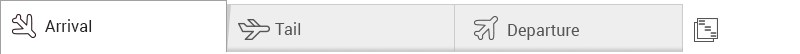
<style>
.page{position:relative;width:800px;height:54px;background:#ffffff}
.page>*{position:absolute;margin:0}
.t1{font:16px "Roboto-Regular";color:#222222}
.t2{font:16px "Roboto-Regular";color:#555555}
</style>
<div class="page">
<p class="t1" style="left:45px;top:19px;width:47px;height:13px">Arrival</p>
<p class="t2" style="left:275px;top:22px;width:26px;height:13px">Tail</p>
<p class="t2" style="left:508px;top:24px;width:71px;height:16px">Departure</p>
</div>
